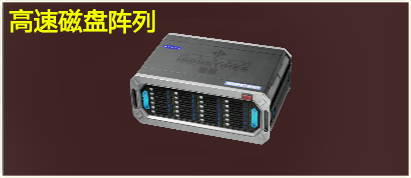
<style>
.page{position:relative;width:411px;height:178px}
.page>*{position:absolute;margin:0}
.t1{font:24px "MicrosoftYaHeiUI";color:#f4ff00;font-weight:bold}
</style>
<div class="page">
<p class="t1" style="left:9px;top:9px;width:146px;height:25px">高速磁盘阵列</p>
</div>
